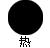
<style>
.page{position:relative;width:50px;height:48px;background:#ffffff}
.page>*{position:absolute;margin:0}
.t1{font:12px "OPPOSans-R";color:#000000}
</style>
<div class="page">
<p class="t1" style="left:19px;top:36px;width:12px;height:11px">热</p>
</div>
